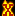
<style>
.page{position:relative;width:15px;height:16px;background:#ae1d00}
.page>*{position:absolute;margin:0}
.t1{font:17px "College";letter-spacing:0.025em;color:#ae1d00;font-variant:small-caps;scale:1.25 1}
</style>
<div class="page">
<p class="t1" style="left:3px;top:4px;width:10px;height:12px">X</p>
<p class="t1" style="left:3px;top:4px;width:10px;height:12px">X</p>
</div>
